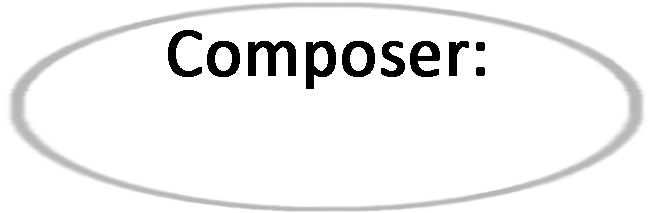
<style>
.page{position:relative;width:650px;height:213px;background:#ffffff}
.page>*{position:absolute;margin:0}
.t1{font:70px "Calibri";color:#000000;font-weight:bold}
</style>
<div class="page">
<p class="t1" style="left:168px;top:30px;width:317px;height:59px">Composer:</p>
</div>
